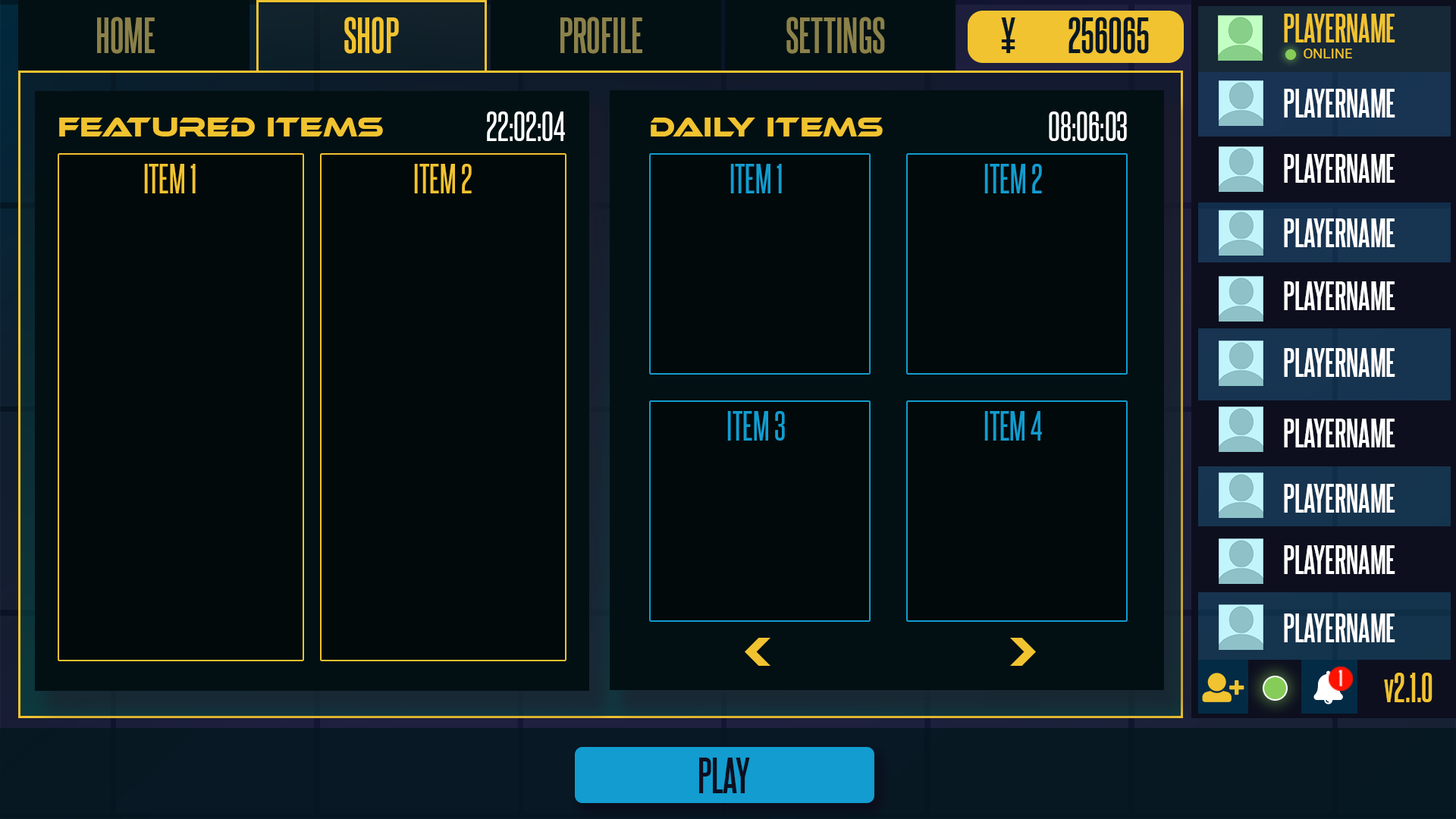
<style>
.page{position:relative;width:1456px;height:819px;background:#02090a}
.page>*{position:absolute;margin:0}
.t1{font:43.2px "SteelfishRg-Bold";color:#8b814a}
.t2{font:43.2px "SteelfishRg-Bold";color:#f1c330}
.t3{font:43.2px "SteelfishRg-Bold";color:#071824}
.t4{font:34.5px "SteelfishRg-Bold";color:#f1c330}
.t5{font:14.1px "Roboto-Regular";color:#f1c330}
.t6{font:34.5px "SteelfishRg-Bold";color:#ffffff}
.t7{font:36.4px "SteelfishRg-Regular";color:#ffffff}
.t8{font:27.3px "EthnocentricRg-Regular";color:#f1c330}
.t9{font:36.4px "SteelfishRg-Regular";color:#f1c330}
.t10{font:36.4px "SteelfishRg-Regular";color:#129ccf}
.t11{font:35.8px "SteelfishRg-Bold";color:#f1c330}
.t12{font:43.2px "SteelfishRg-Bold";color:#0d0f1e}
</style>
<div class="page">
<p class="t1" style="left:97px;top:17px;width:58px;height:37px">HOME</p>
<p class="t2" style="left:344px;top:17px;width:55px;height:37px">SHOP</p>
<p class="t1" style="left:560px;top:17px;width:82px;height:37px">PROFILE</p>
<p class="t1" style="left:786px;top:17px;width:99px;height:37px">SETTINGS</p>
<p class="t3" style="left:1001px;top:17px;width:14px;height:36px">¥</p>
<p class="t3" style="left:1068px;top:17px;width:81px;height:37px">256065</p>
<p class="t4" style="left:1284px;top:14px;width:111px;height:28px">PLAYERNAME</p>
<p class="t5" style="left:1304px;top:49px;width:48px;height:9px">ONLINE</p>
<p class="t6" style="left:1284px;top:89px;width:111px;height:29px">PLAYERNAME</p>
<p class="t7" style="left:487px;top:111px;width:78px;height:30px">22:02:04</p>
<p class="t7" style="left:1049px;top:111px;width:78px;height:30px">08:06:03</p>
<p class="t8" style="left:59px;top:118px;width:324px;height:18px">Featured items</p>
<p class="t8" style="left:651px;top:118px;width:232px;height:18px">Daily Items</p>
<p class="t6" style="left:1284px;top:154px;width:111px;height:29px">PLAYERNAME</p>
<p class="t9" style="left:144px;top:164px;width:52px;height:29px">ITEM 1</p>
<p class="t9" style="left:414px;top:164px;width:58px;height:29px">ITEM 2</p>
<p class="t10" style="left:730px;top:164px;width:52px;height:29px">ITEM 1</p>
<p class="t10" style="left:984px;top:164px;width:58px;height:29px">ITEM 2</p>
<p class="t6" style="left:1284px;top:218px;width:111px;height:29px">PLAYERNAME</p>
<p class="t6" style="left:1284px;top:281px;width:111px;height:29px">PLAYERNAME</p>
<p class="t6" style="left:1284px;top:348px;width:111px;height:29px">PLAYERNAME</p>
<p class="t10" style="left:727px;top:411px;width:58px;height:30px">ITEM 3</p>
<p class="t10" style="left:984px;top:411px;width:58px;height:30px">ITEM 4</p>
<p class="t6" style="left:1284px;top:419px;width:111px;height:28px">PLAYERNAME</p>
<p class="t6" style="left:1284px;top:484px;width:111px;height:29px">PLAYERNAME</p>
<p class="t6" style="left:1284px;top:545px;width:111px;height:29px">PLAYERNAME</p>
<p class="t6" style="left:1284px;top:613px;width:111px;height:29px">PLAYERNAME</p>
<p class="t11" style="left:1384px;top:673px;width:48px;height:29px">v2.1.0</p>
<p class="t12" style="left:699px;top:758px;width:51px;height:35px">PLAY</p>
</div>
